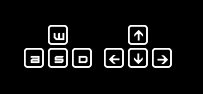
<style>
.page{position:relative;width:203px;height:94px;background:#000000}
.page>*{position:absolute;margin:0}
.t1{font:7px "Sector-034";color:#ffffff}
</style>
<div class="page">
<p class="t1" style="left:53px;top:32px;width:12px;height:9px">W</p>
<p class="t1" style="left:30px;top:55px;width:10px;height:9px">a</p>
<p class="t1" style="left:54px;top:55px;width:10px;height:9px">s</p>
<p class="t1" style="left:78px;top:55px;width:10px;height:9px">d</p>
</div>
